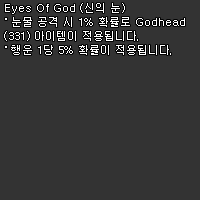
<style>
.page{position:relative;width:200px;height:200px;background:#333333}
.page>*{position:absolute;margin:0}
.t1{font:11px/14px "Dotum";color:#ffffff}
</style>
<div class="page">
<p class="t1" style="left:4px;top:3px;width:181px;height:52px">Eyes Of God (신의 눈)<br>˚ 눈물 공격 시 1% 확률로 Godhead<br>(331) 아이템이 적용됩니다.<br>˚ 행운 1당 5% 확률이 적용됩니다.</p>
</div>
